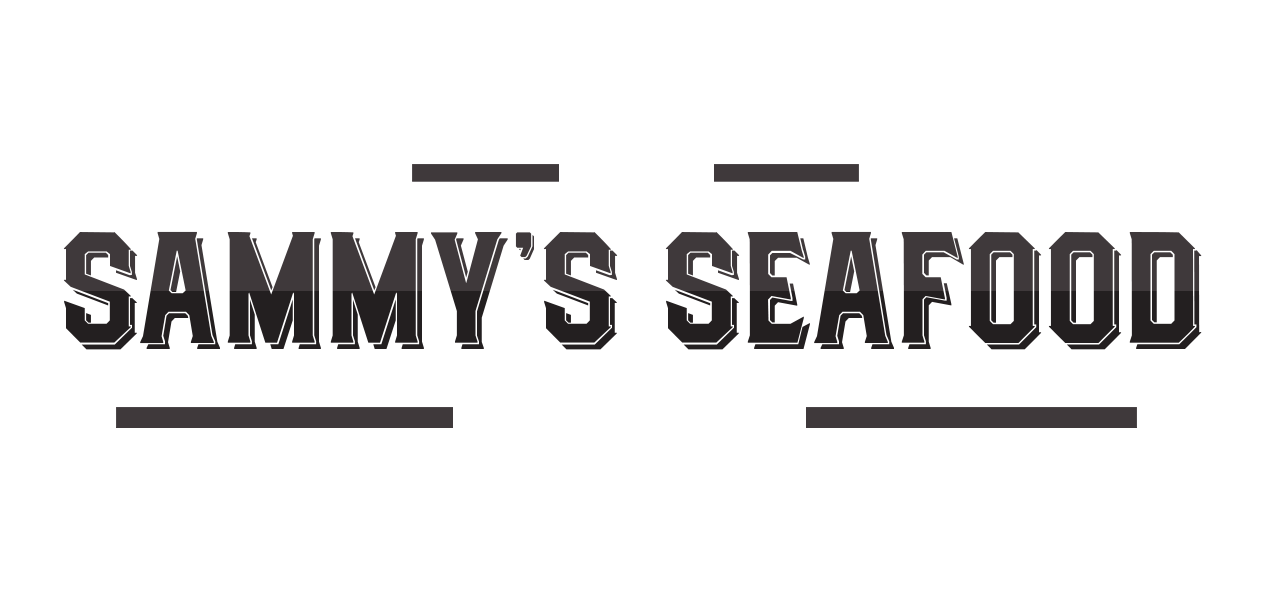
<style>
.page{position:relative;width:1280px;height:600px;background:#ffffff}
.page>*{position:absolute;margin:0}
.t1{font:158px "DealersShaded"}
</style>
<div class="page">
<p class="t1" style="left:63px;top:231px;width:1139px;height:119px">Sammy’s Seafood</p>
</div>
